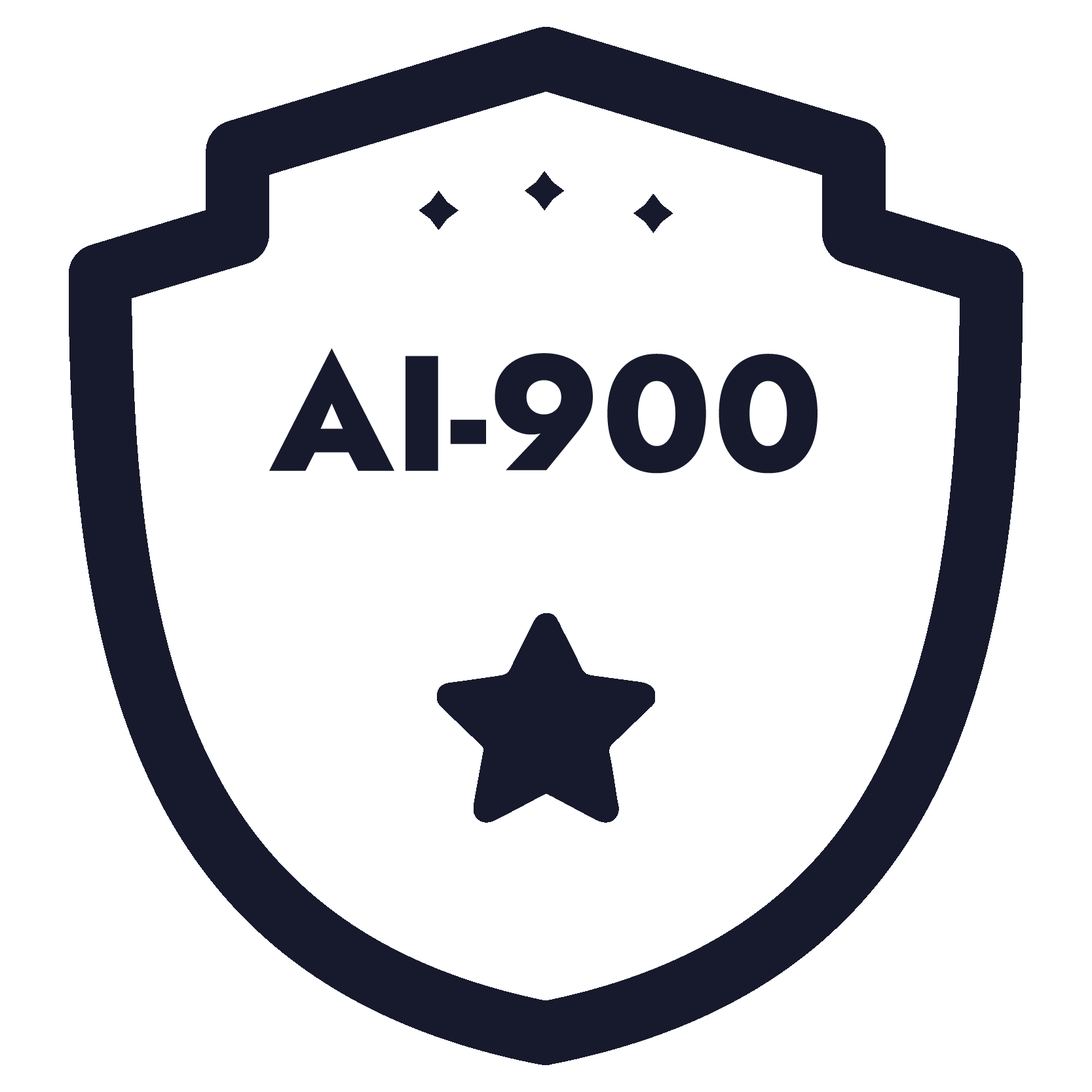
<style>
.page{position:relative;width:1092px;height:1092px;background:#ffffff}
.page>*{position:absolute;margin:0}
.t1{font:163.8px "JostRoman-ExtraBold";color:#171a2c}
</style>
<div class="page">
<p class="t1" style="left:269px;top:348px;width:549px;height:126px">AI-900</p>
</div>
